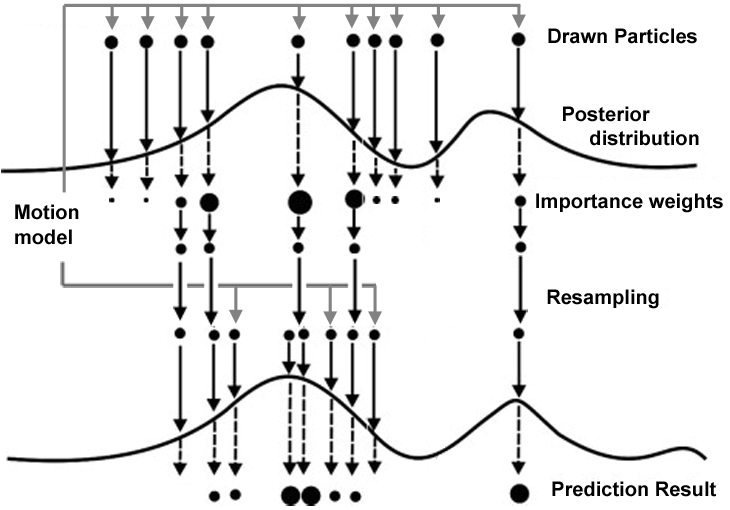
<style>
.page{position:relative;width:730px;height:510px;background:#ffffff}
.page>*{position:absolute;margin:0}
.t1{font:20.1px "Arial-BoldMT";color:#000000}
</style>
<div class="page">
<p class="t1" style="left:548px;top:28px;width:149px;height:16px">Drawn Particles</p>
<p class="t1" style="left:563px;top:106px;width:136px;height:40px">Posterior <br>     distribution</p>
<p class="t1" style="left:536px;top:193px;width:187px;height:116px">Importance weights<br><br><br><br>  Resampling</p>
<p class="t1" style="left:15px;top:204px;width:64px;height:41px">Motion <br>model</p>
<p class="t1" style="left:552px;top:481px;width:164px;height:16px">Prediction Result</p>
</div>
